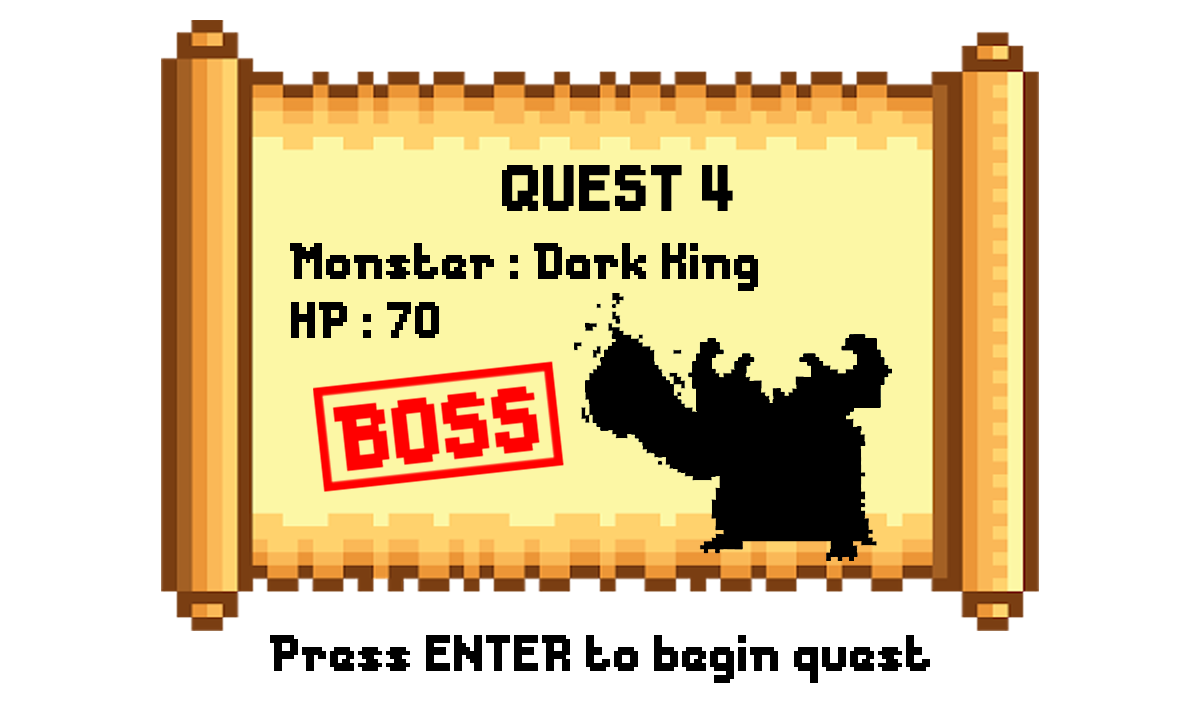
<style>
.page{position:relative;width:1200px;height:720px;background:#ffffff}
.page>*{position:absolute;margin:0}
.t1{font:61.3px "Messe-Duesseldorf";color:#000000}
.t2{font:48px "Messe-Duesseldorf";color:#000000}
</style>
<div class="page">
<p class="t1" style="left:502px;top:165px;width:231px;height:46px">QUEST 4</p>
<p class="t2" style="left:290px;top:243px;width:468px;height:48px">Monster : Dark King</p>
<p class="t2" style="left:291px;top:302px;width:148px;height:36px">HP : 70</p>
<p class="t2" style="left:270px;top:635px;width:660px;height:48px">Press ENTER to begin quest</p>
</div>
